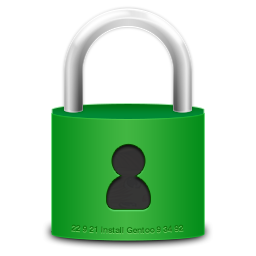
<style>
.page{position:relative;width:256px;height:256px;background:#ffffff}
.page>*{position:absolute;margin:0}
.t1{font:8px "Helvetica-Bold";color:#0c780c}
</style>
<div class="page">
<p class="t1" style="left:71px;top:224px;width:113px;height:10px">22 9 21 Install Gentoo 9 34 92</p>
</div>
